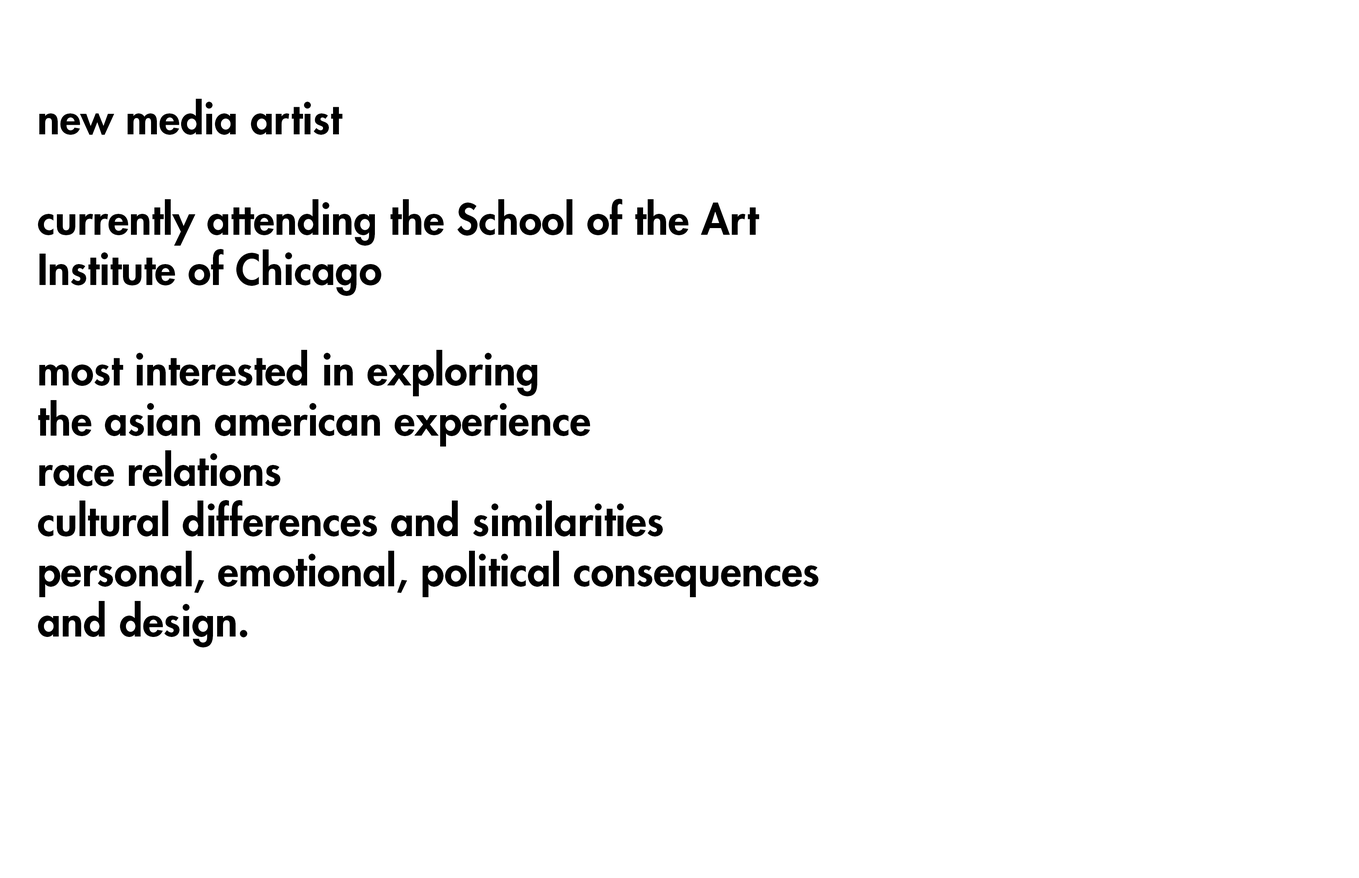
<style>
.page{position:relative;width:1359px;height:878px;background:#ffffff}
.page>*{position:absolute;margin:0}
.t1{font:41.8px "Futura-Heavy";color:#000000}
</style>
<div class="page">
<p class="t1" style="left:38px;top:99px;width:780px;height:548px">new media artist<br><br>currently attending the School of the Art <br>Institute of Chicago<br><br>most interested in exploring <br>the asian american experience<br>race relations<br>cultural differences and similarities<br>personal, emotional, political consequences<br>and design.</p>
</div>
